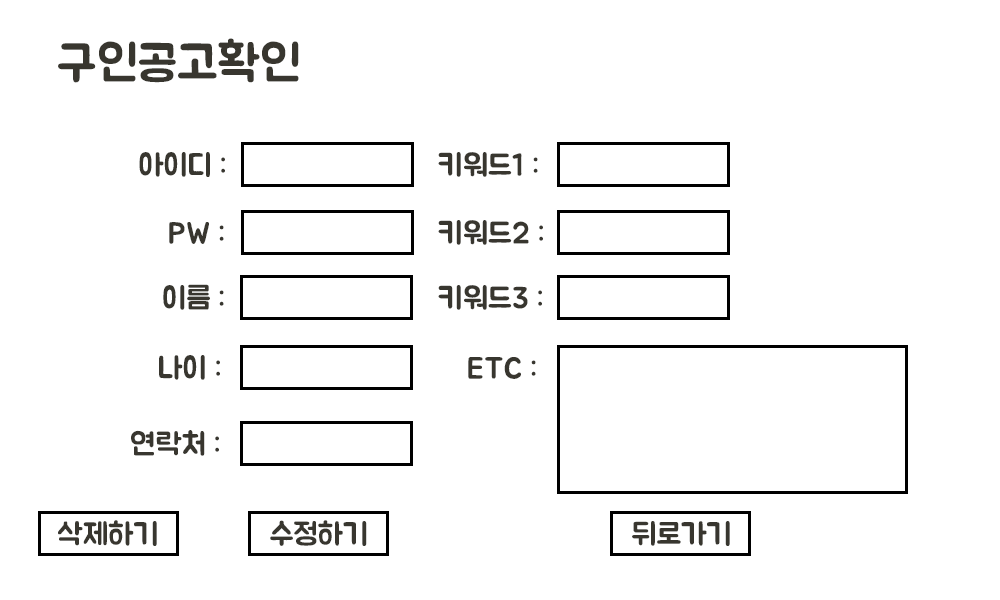
<style>
.page{position:relative;width:1000px;height:600px;background:#ffffff}
.page>*{position:absolute;margin:0}
.t1{font:50px "BMJUA";color:#38362f}
.t2{font:30.6px "BMJUA";color:#38362f}
</style>
<div class="page">
<p class="t1" style="left:58px;top:38px;width:241px;height:45px">구인공고확인</p>
<p class="t2" style="left:139px;top:152px;width:86px;height:25px">아이디 :</p>
<p class="t2" style="left:438px;top:152px;width:100px;height:25px">키워드1 :</p>
<p class="t2" style="left:169px;top:222px;width:55px;height:22px">PW :</p>
<p class="t2" style="left:438px;top:220px;width:105px;height:25px">키워드2 :</p>
<p class="t2" style="left:163px;top:284px;width:61px;height:26px">이름 :</p>
<p class="t2" style="left:438px;top:285px;width:104px;height:25px">키워드3 :</p>
<p class="t2" style="left:159px;top:355px;width:61px;height:25px">나이 :</p>
<p class="t2" style="left:468px;top:357px;width:68px;height:22px">ETC :</p>
<p class="t2" style="left:131px;top:430px;width:88px;height:26px">연락처 :</p>
<p class="t2" style="left:58px;top:520px;width:99px;height:26px">삭제하기</p>
<p class="t2" style="left:270px;top:520px;width:97px;height:26px">수정하기</p>
<p class="t2" style="left:632px;top:521px;width:98px;height:25px">뒤로가기</p>
</div>
